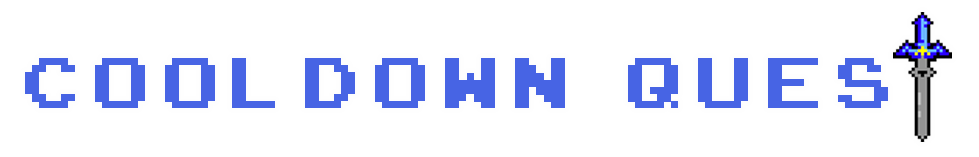
<style>
.page{position:relative;width:979px;height:157px;background:#ffffff}
.page>*{position:absolute;margin:0}
.t1{font:100px "ArcadeClassic";letter-spacing:0.15em;color:#4764e4}
</style>
<div class="page">
<p class="t1" style="left:25px;top:58px;width:863px;height:50px">Cooldown Ques</p>
</div>
